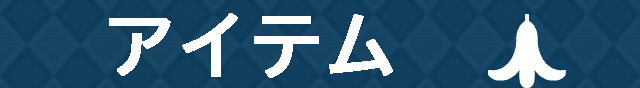
<style>
.page{position:relative;width:640px;height:88px}
.page>*{position:absolute;margin:0}
.t1{font:72px "BIZ-UDGothic-Bold";color:#ffffff;font-weight:bold}
</style>
<div class="page">
<p class="t1" style="left:109px;top:13px;width:284px;height:65px">アイテム</p>
</div>
